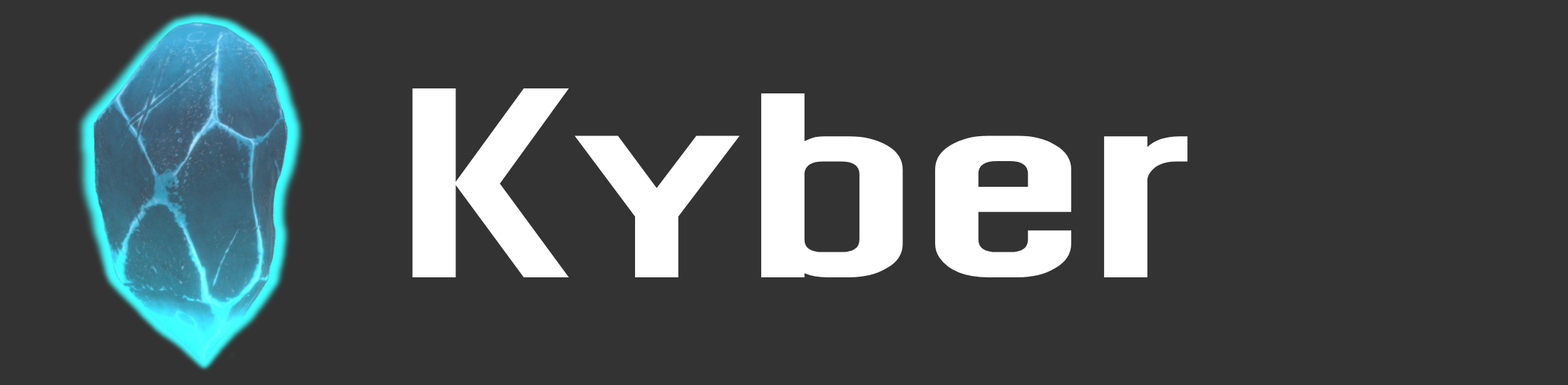
<style>
.page{position:relative;width:1568px;height:385px;background:#333333}
.page>*{position:absolute;margin:0}
.t1{font:392px "Dhurjati";color:#ffffff}
</style>
<div class="page">
<p class="t1" style="left:412px;top:88px;width:776px;height:189px">Kyber</p>
</div>
